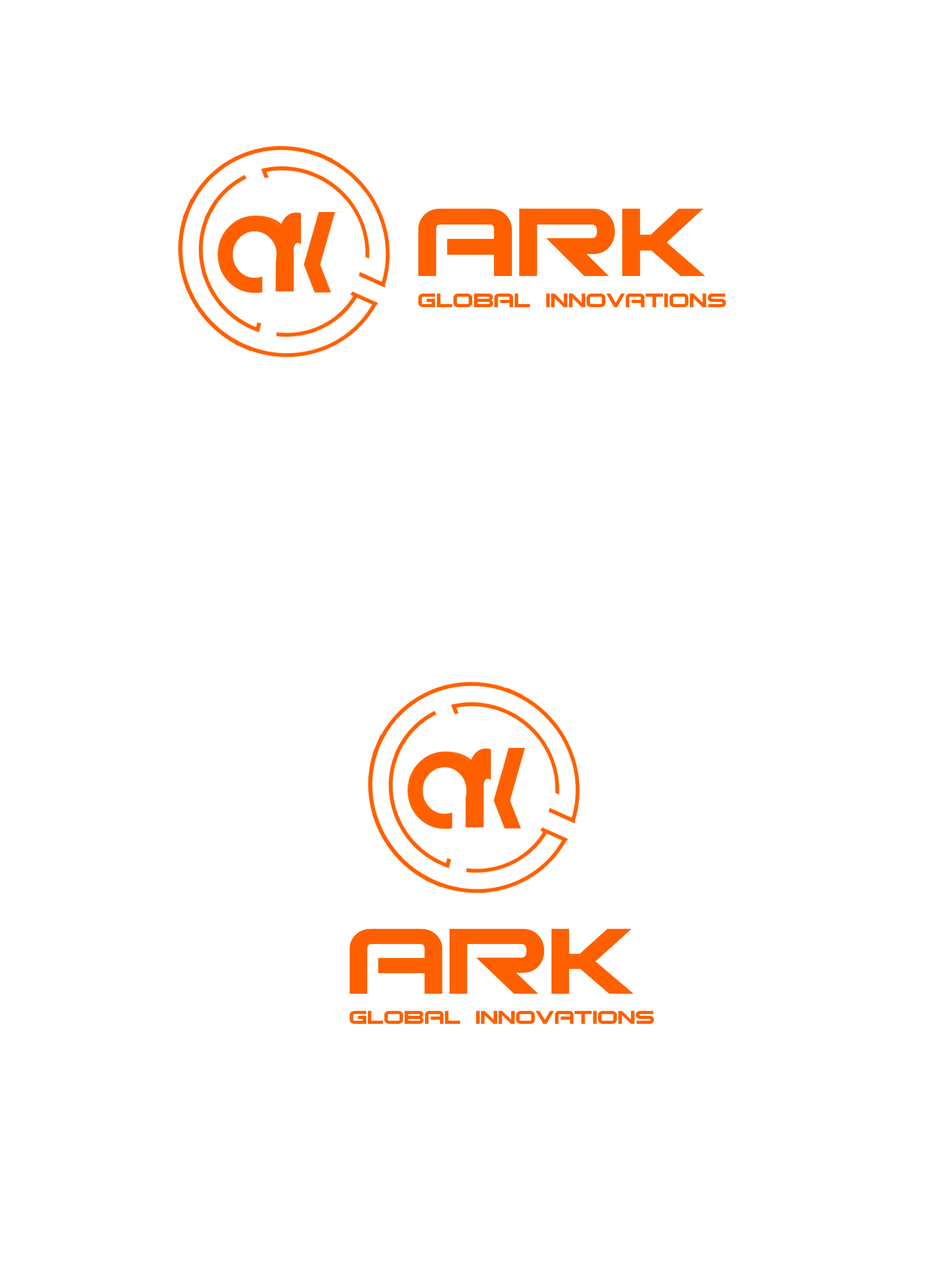
<style>
.page{position:relative;width:946px;height:1261px;background:#ffffff}
.page>*{position:absolute;margin:0}
.t1{font:26.1px "Bitsumishi";color:#fe6000;scale:1.14 1}
.t2{font:130.3px "Bitsumishi";color:#fe6000;scale:1.14 1}
.t3{font:158.8px "Bauhaus93";color:#fe6000;scale:0.57 1}
.t4{font:25.1px "Bitsumishi";color:#fe6000;scale:1.17 1}
.t5{font:125.4px "Bitsumishi";color:#fe6000;scale:1.17 1}
</style>
<div class="page">
<p class="t1" style="left:418px;top:208px;width:308px;height:99px"><span class="t2">ARK <br></span>Global innovations</p>
<p class="t3" style="left:276px;top:212px;width:25px;height:79px">r</p>
<p class="t3" style="left:466px;top:748px;width:25px;height:79px">r</p>
<p class="t4" style="left:350px;top:929px;width:304px;height:95px"><span class="t5">ARK <br></span>Global innovations</p>
</div>
